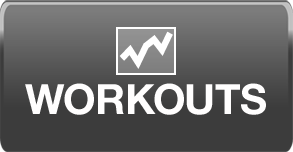
<style>
.page{position:relative;width:293px;height:152px;background:#3c3c3c}
.page>*{position:absolute;margin:0}
.t1{font:41.7px "HelveticaNeue-Bold";color:#fffefe}
</style>
<div class="page">
<p class="t1" style="left:25px;top:83px;width:241px;height:32px">WORKOUTS</p>
</div>
